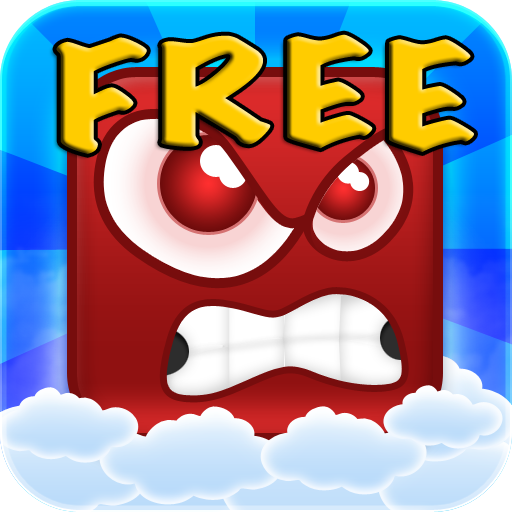
<style>
.page{position:relative;width:512px;height:512px}
.page>*{position:absolute;margin:0}
.t1{font:128px "MarkerFelt-Wide";letter-spacing:0.05em;color:#ffcc00;scale:1.5 1}
</style>
<div class="page">
<p class="t1" style="left:56px;top:34px;width:418px;height:120px">FREE</p>
</div>
